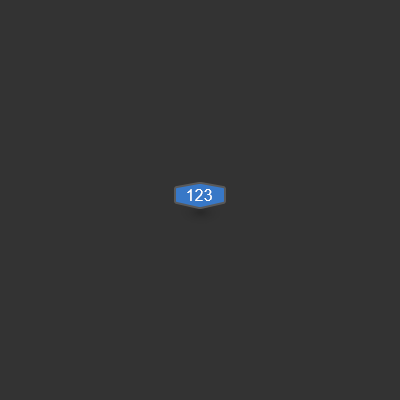
<style>
.page{position:relative;width:400px;height:400px;background:#333333}
.page>*{position:absolute;margin:0}
.t1{font:16px "ArialMT";color:#ffffff}
</style>
<div class="page">
<p class="t1" style="left:187px;top:189px;width:25px;height:12px">123</p>
</div>
